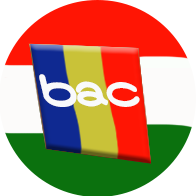
<style>
.page{position:relative;width:196px;height:196px;background:#ff1504}
.page>*{position:absolute;margin:0}
.t1{font:41.4px "!Jamiroquai!";color:#f9fafb;scale:0.75 1}
</style>
<div class="page">
<p class="t1" style="left:39px;top:74px;width:101px;height:33px">BAC</p>
</div>
